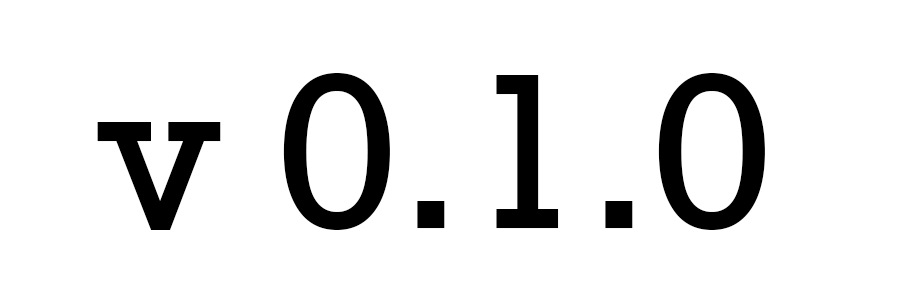
<style>
.page{position:relative;width:900px;height:300px;background:#ffffff}
.page>*{position:absolute;margin:0}
.t1{font:225px "Rockwell";color:#000000}
</style>
<div class="page">
<p class="t1" style="left:97px;top:73px;width:668px;height:157px">v 0.1.0</p>
</div>
